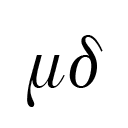
<style>
.page{position:relative;width:128px;height:128px;background:#ffffff}
.page>*{position:absolute;margin:0}
.t1{font:72px "OldStandardTT-Italic";color:#000000}
</style>
<div class="page">
<p class="t1" style="left:27px;top:35px;width:76px;height:72px">μδ</p>
</div>
